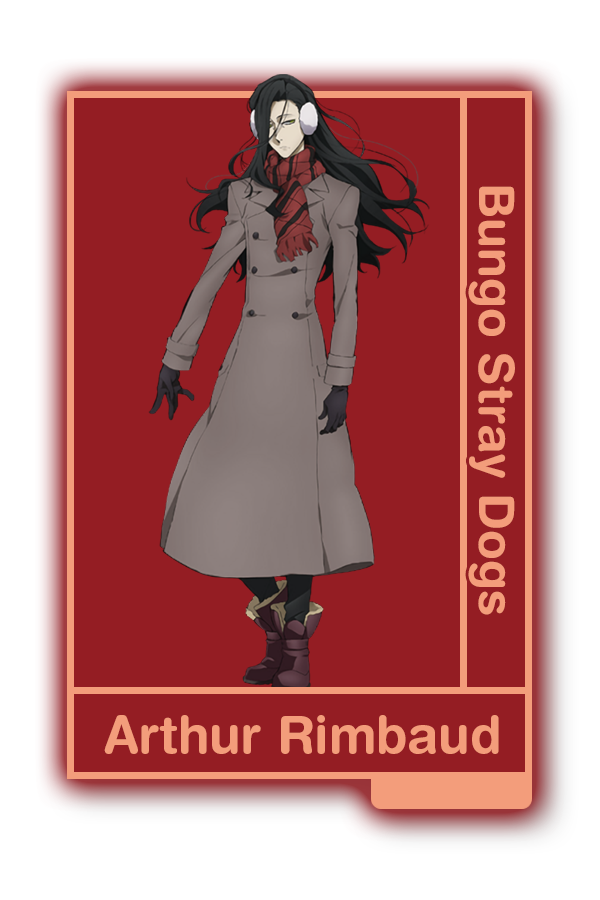
<style>
.page{position:relative;width:600px;height:900px;background:#941d23}
.page>*{position:absolute;margin:0}
.t1{font:48.8px "HelveticaRounded-Bold";color:#f39d7b}
.t2{font:51.1px "HelveticaRounded-Bold";color:#f39d7b}
</style>
<div class="page">
<p class="t1" style="left:468px;top:186px;width:47px;height:429px;rotate:90deg">Bungo Stray Dogs</p>
<p class="t2" style="left:104px;top:715px;width:395px;height:39px">Arthur Rimbaud</p>
</div>
